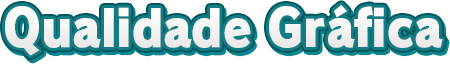
<style>
.page{position:relative;width:450px;height:66px;background:#ffffff}
.page>*{position:absolute;margin:0}
.t1{font:50.5px "RodinPro-UB";letter-spacing:-0.003em;color:#f1f2f2;scale:0.9 1}
</style>
<div class="page">
<p class="t1" style="left:5px;top:5px;width:438px;height:51px">Qualidade Gráfica</p>
</div>
